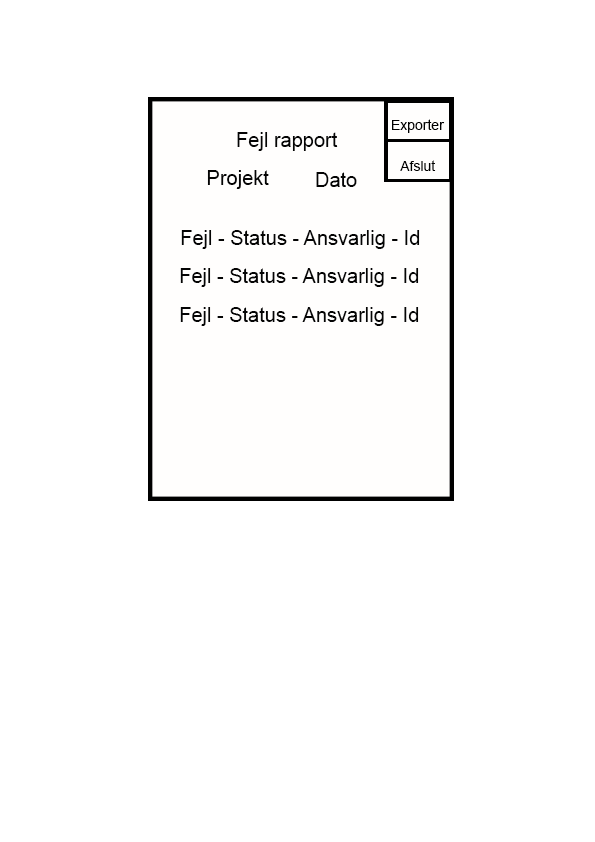
<style>
.page{position:relative;width:595px;height:842px;background:#ffffff}
.page>*{position:absolute;margin:0}
.t1{font:14px "ArialMT";color:#000000}
.t2{font:20px "ArialMT";color:#040404}
</style>
<div class="page">
<p class="t1" style="left:392px;top:119px;width:53px;height:14px">Exporter</p>
<p class="t2" style="left:237px;top:132px;width:101px;height:19px">Fejl rapport</p>
<p class="t1" style="left:400px;top:160px;width:36px;height:11px">Afslut</p>
<p class="t2" style="left:207px;top:170px;width:62px;height:19px">Projekt</p>
<p class="t2" style="left:316px;top:172px;width:41px;height:15px">Dato</p>
<p class="t2" style="left:181px;top:230px;width:239px;height:19px">Fejl - Status - Ansvarlig - Id</p>
<p class="t2" style="left:180px;top:268px;width:239px;height:19px">Fejl - Status - Ansvarlig - Id</p>
<p class="t2" style="left:180px;top:307px;width:239px;height:19px">Fejl - Status - Ansvarlig - Id</p>
</div>
